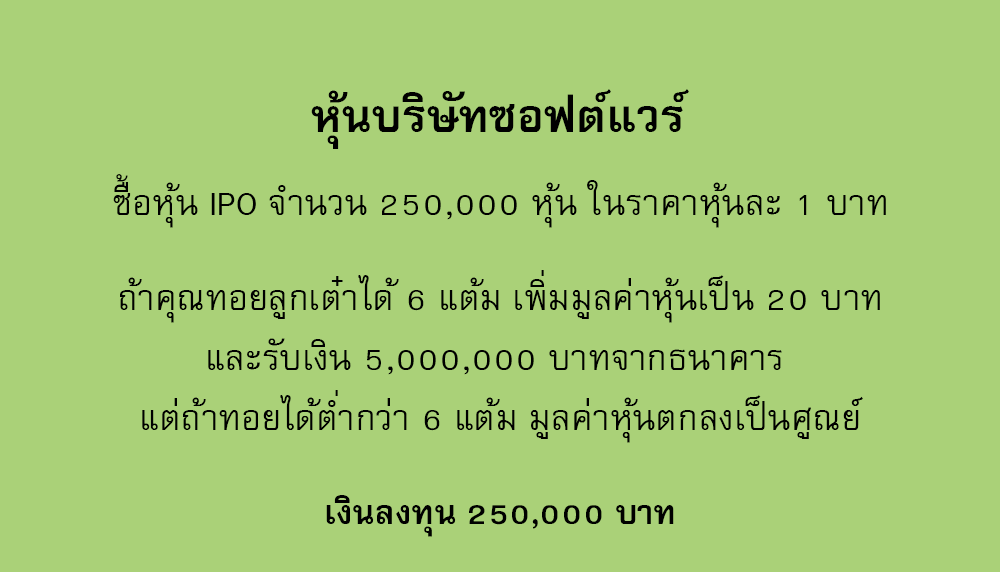
<style>
.page{position:relative;width:1000px;height:572px;background:#aad178}
.page>*{position:absolute;margin:0}
.t1{font:64px "FreesiaUPCBold";color:#000000}
.t2{font:50px "FreesiaUPC";color:#000000}
.t3{font:50px/60px "FreesiaUPC";color:#000000}
.t4{font:47px "FreesiaUPCBold";color:#000000}
</style>
<div class="page">
<p class="t1" style="left:311px;top:89px;width:378px;height:60px">หุ้นบริษัทซอฟต์แวร์</p>
<p class="t2" style="left:113px;top:174px;width:773px;height:54px">ซื้อหุ้น IPO จำนวน 250,000 หุ้น ในราคาหุ้นละ 1 บาท</p>
<p class="t3" style="left:120px;top:270px;width:760px;height:173px;text-align:center">ถ้าคุณทอยลูกเต๋าได้ 6 แต้ม เพิ่มมูลค่าหุ้นเป็น 20 บาท<br>และรับเงิน 5,000,000 บาทจากธนาคาร <br>แต่ถ้าทอยได้ต่ำกว่า 6 แต้ม มูลค่าหุ้นตกลงเป็นศูณย์</p>
<p class="t4" style="left:326px;top:495px;width:348px;height:42px">เงินลงทุน 250,000 บาท</p>
</div>
